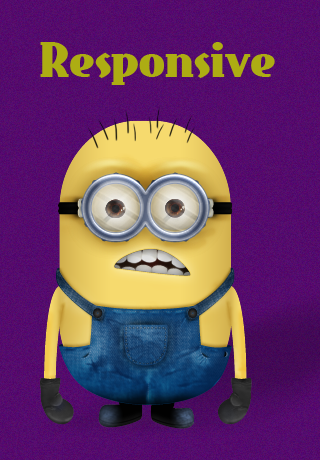
<style>
.page{position:relative;width:320px;height:460px}
.page>*{position:absolute;margin:0}
.t1{font:48px "EastMarket";color:#adad13}
</style>
<div class="page">
<p class="t1" style="left:40px;top:42px;width:235px;height:43px">Responsive</p>
</div>
